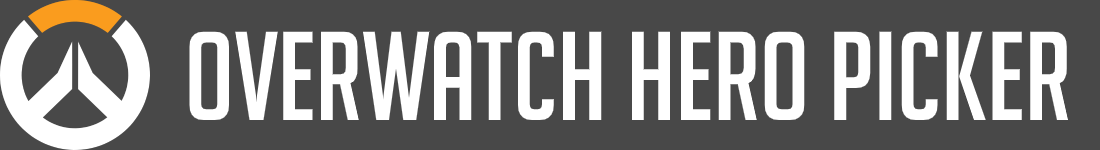
<style>
.page{position:relative;width:1100px;height:150px;background:#484848}
.page>*{position:absolute;margin:0}
.t1{font:123px "BigNoodleTitling";color:#ffffff}
</style>
<div class="page">
<p class="t1" style="left:189px;top:31px;width:880px;height:89px">Overwatch Hero Picker</p>
</div>
